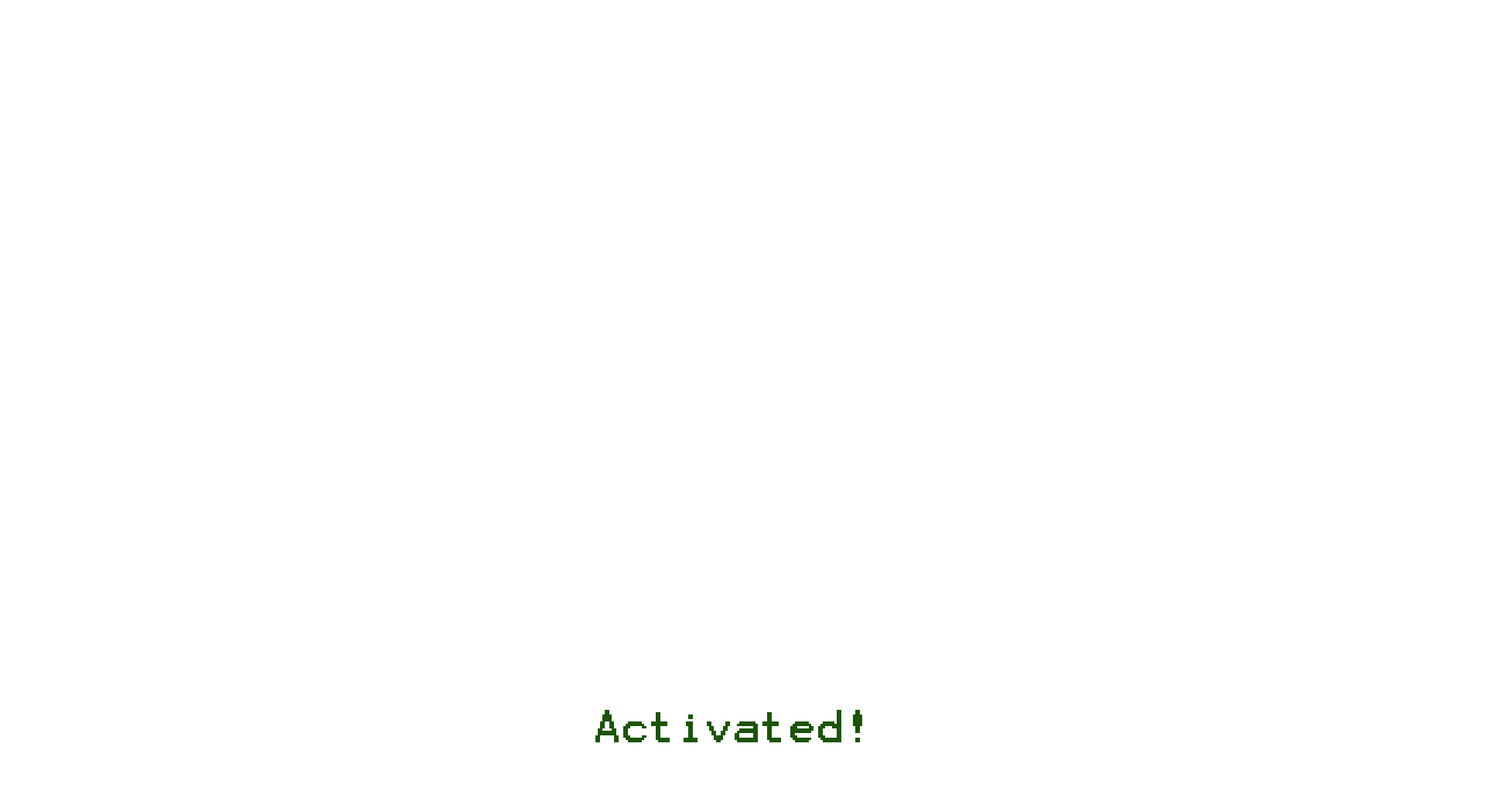
<style>
.page{position:relative;width:1494px;height:798px;background:#ffffff}
.page>*{position:absolute;margin:0}
.t1{font:37.1px "Terminal";color:#1b5407}
</style>
<div class="page">
<p class="t1" style="left:595px;top:710px;width:267px;height:32px">Activated!</p>
</div>
